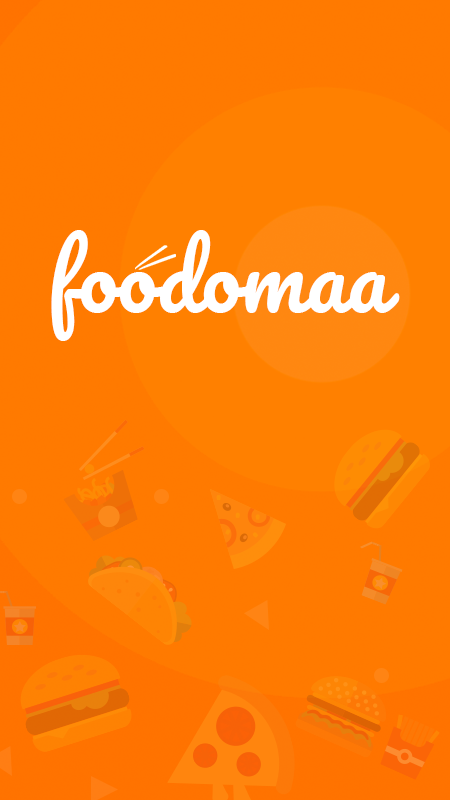
<style>
.page{position:relative;width:450px;height:800px;background:#ff7a00}
.page>*{position:absolute;margin:0}
.t1{font:87.2px "Pacifico-Regular";color:#ffffff}
</style>
<div class="page">
<p class="t1" style="left:51px;top:230px;width:349px;height:111px">foodomaa</p>
</div>
